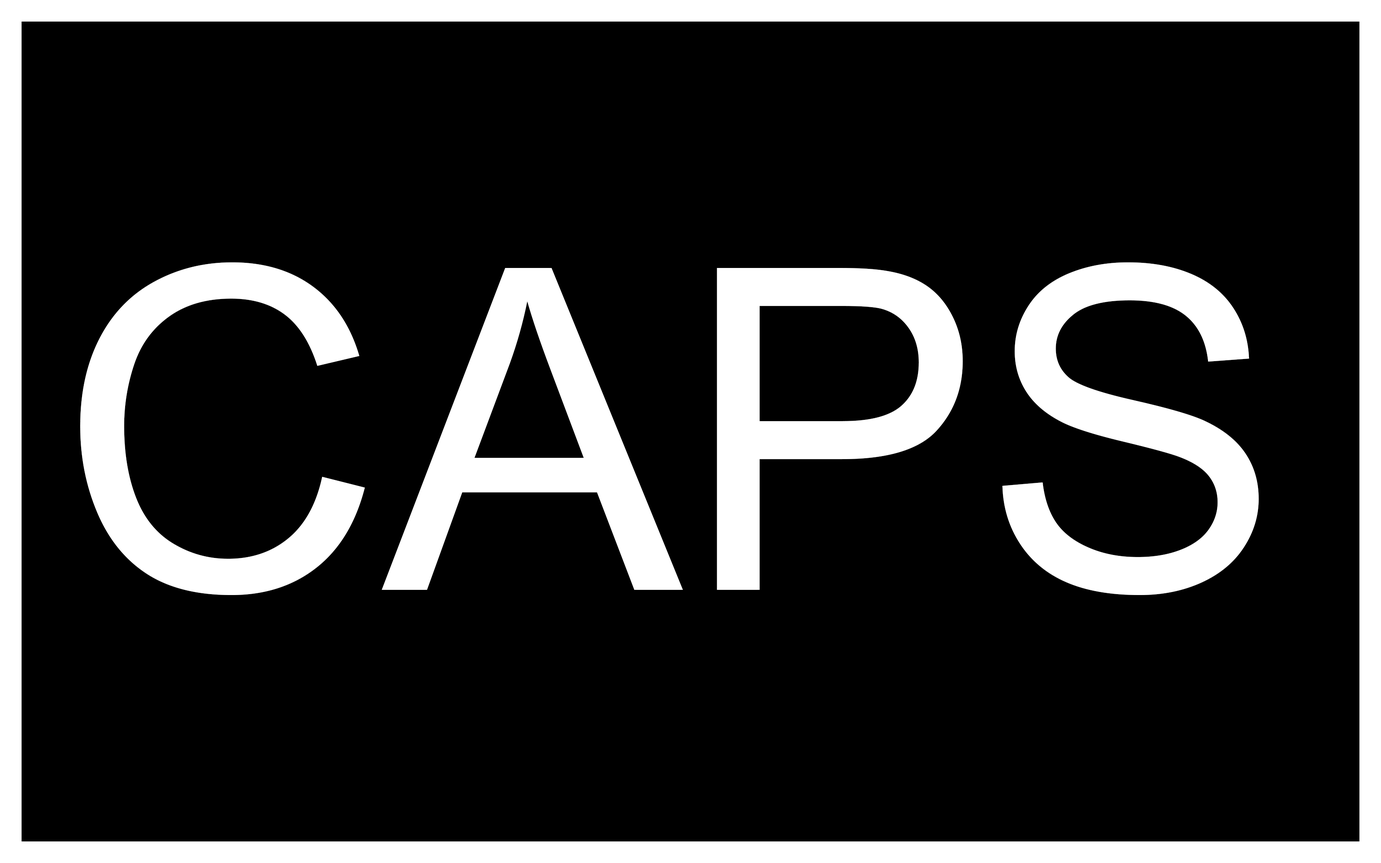
<style>
.page{position:relative;width:1381px;height:863px;background:#000000}
.page>*{position:absolute;margin:0}
.t1{font:449.6px "ArialMT";color:#ffffff}
</style>
<div class="page">
<p class="t1" style="left:80px;top:262px;width:1179px;height:333px">CAPS</p>
</div>
